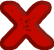
<style>
.page{position:relative;width:54px;height:50px;background:#c30800}
.page>*{position:absolute;margin:0}
.t1{font:100.4px "BillyforgesDemo";color:#c30800;scale:2 1}
</style>
<div class="page">
<p class="t1" style="left:3px;top:4px;width:48px;height:43px">x</p>
</div>
